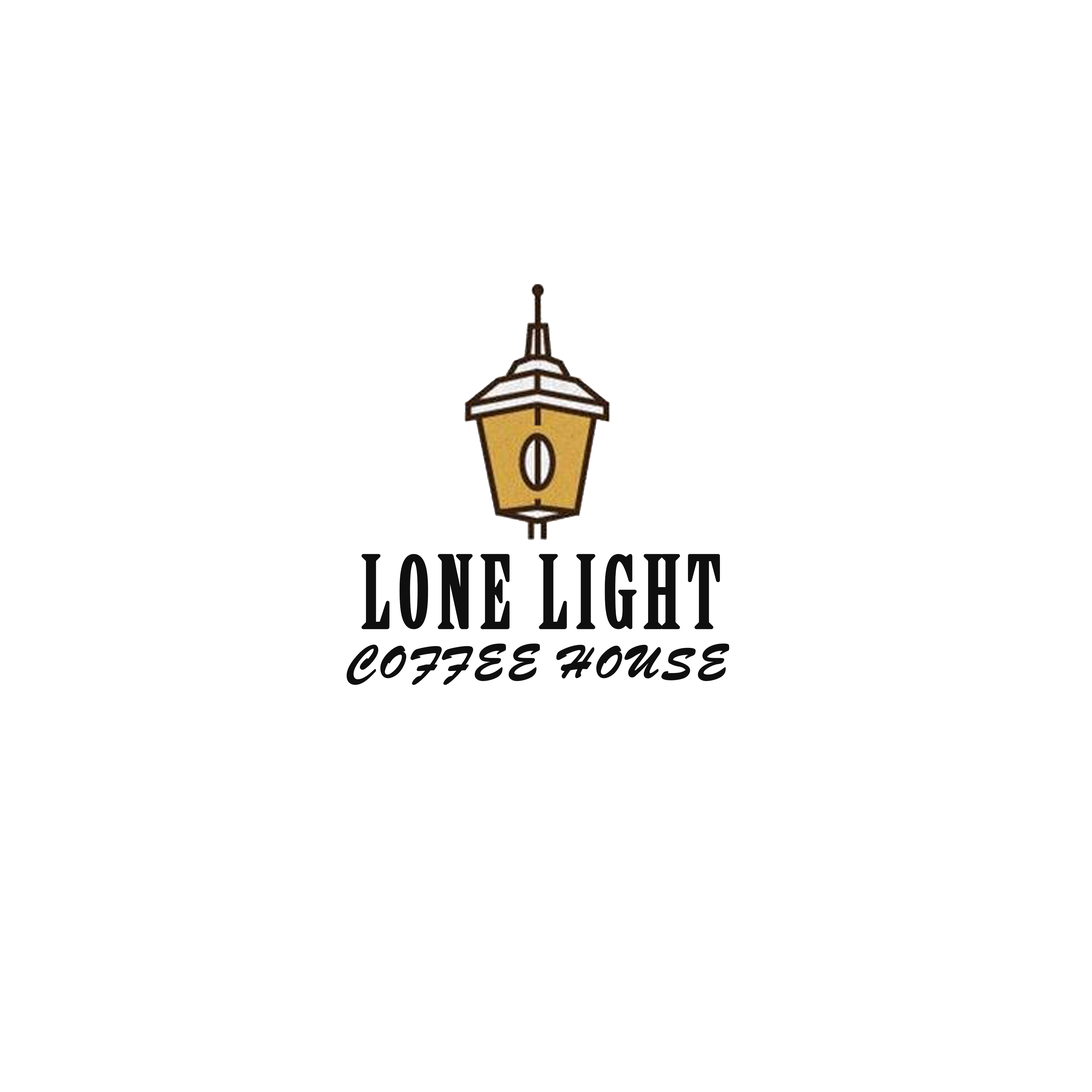
<style>
.page{position:relative;width:1092px;height:1092px;background:#ffffff}
.page>*{position:absolute;margin:0}
.t1{font:96.8px "BirchStd";letter-spacing:0.06em;color:#0f0f0f;text-transform:uppercase;font-weight:bold}
.t2{font:48.4px "BrushScriptMT";letter-spacing:0.06em;color:#0f0f0f;text-transform:uppercase;font-weight:bold}
</style>
<div class="page">
<p class="t1" style="left:361px;top:554px;width:359px;height:75px">Lone Light</p>
<p class="t2" style="left:347px;top:644px;width:382px;height:41px">coffee House</p>
</div>
